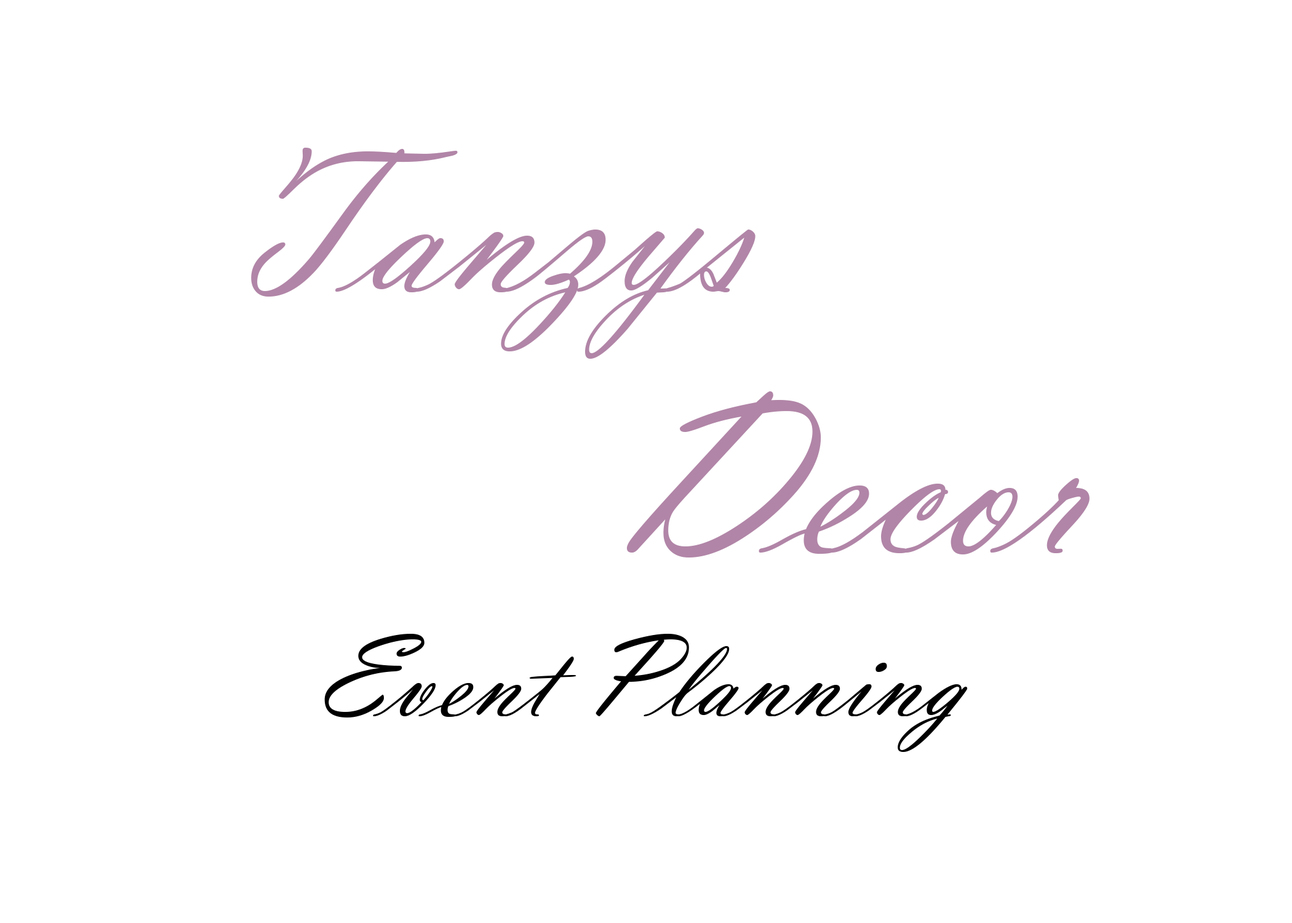
<style>
.page{position:relative;width:1292px;height:923px;background:#ffffff}
.page>*{position:absolute;margin:0}
.t1{font:214.8px "VladimirScript";color:#b185a7}
.t2{font:242.8px "VladimirScript";color:#b185a7}
.t3{font:120.5px "VladimirScript";color:#000000}
</style>
<div class="page">
<p class="t1" style="left:251px;top:148px;width:505px;height:211px">Tanzys</p>
<p class="t2" style="left:626px;top:391px;width:464px;height:166px">Decor</p>
<p class="t3" style="left:324px;top:634px;width:644px;height:118px">Event Planning</p>
</div>
